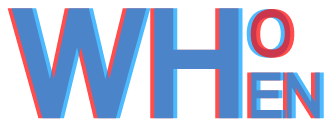
<style>
.page{position:relative;width:335px;height:124px;background:#ffffff}
.page>*{position:absolute;margin:0}
.t1{font:165.3px "CoolveticaRg-Regular";color:#4c84ca}
.t2{font:68.9px "CoolveticaRg-Regular"}
.t3{font:68.9px "CoolveticaRg-Regular";color:#ca374c}
.t4{font:68.9px "CoolveticaRg-Regular";color:#4c84ca}
</style>
<div class="page">
<p class="t1" style="left:7px;top:8px;width:232px;height:111px">WH</p>
<p class="t1" style="left:11px;top:8px;width:232px;height:111px">WH</p>
<p class="t2" style="left:246px;top:9px;width:45px;height:49px">O</p>
<p class="t3" style="left:250px;top:9px;width:45px;height:49px">O</p>
<p class="t4" style="left:247px;top:72px;width:73px;height:47px">EN</p>
<p class="t4" style="left:251px;top:72px;width:73px;height:47px">EN</p>
</div>
